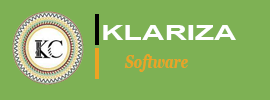
<style>
.page{position:relative;width:270px;height:100px;background:#7eb154}
.page>*{position:absolute;margin:0}
.t1{font:19.9px "Arial-BoldMT";color:#ffffff;scale:1.55 1}
.t2{font:19.2px "Georgia-BoldItalic";color:#eda323;scale:0.69 1}
.t3{font:19.2px "Georgia-Bold";color:#000000;scale:0.69 1}
</style>
<div class="page">
<p class="t1" style="left:103px;top:25px;width:133px;height:15px">KLARIZA</p>
<p class="t2" style="left:124px;top:54px;width:64px;height:18px"><span class="t3"><br></span>Software</p>
</div>
